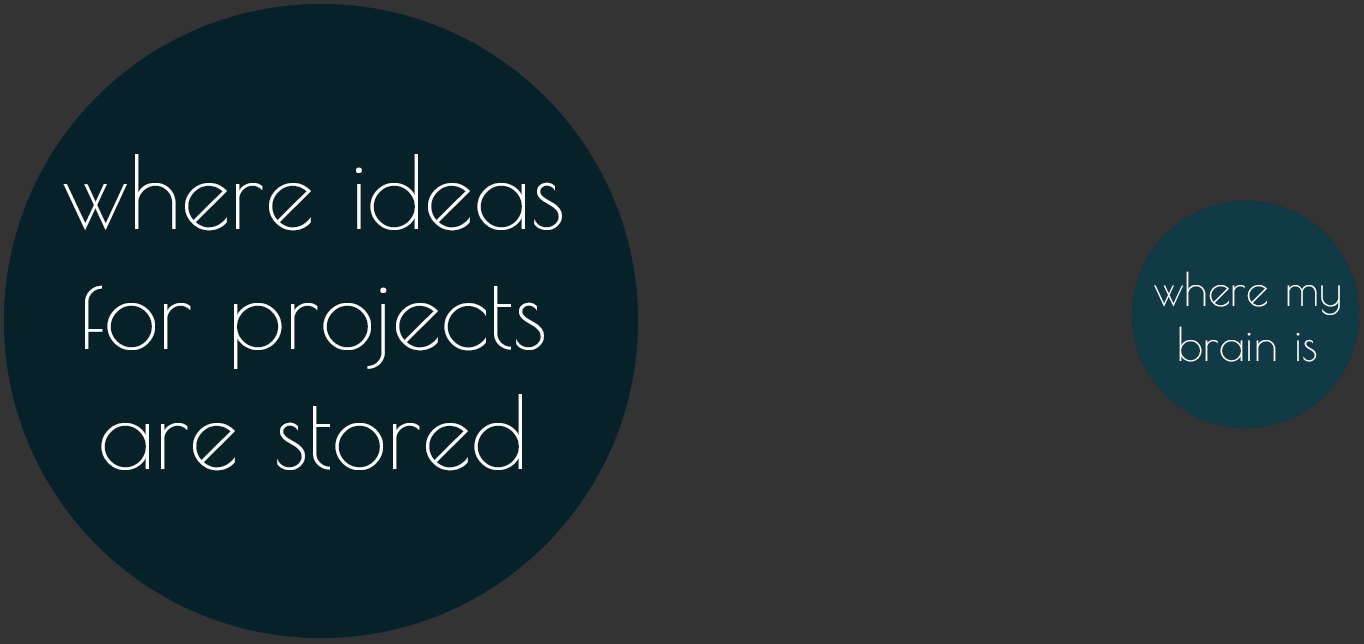
<style>
.page{position:relative;width:1364px;height:644px;background:#333333}
.page>*{position:absolute;margin:0}
.t1{font:100px "PoiretOne-Regular";color:#ffffff}
.t2{font:45.8px "PoiretOne-Regular";color:#ffffff}
</style>
<div class="page">
<p class="t1" style="left:63px;top:154px;width:499px;height:317px;text-align:center">where ideas for projects are stored</p>
<p class="t2" style="left:1154px;top:271px;width:186px;height:91px;text-align:center">where my brain is</p>
</div>
